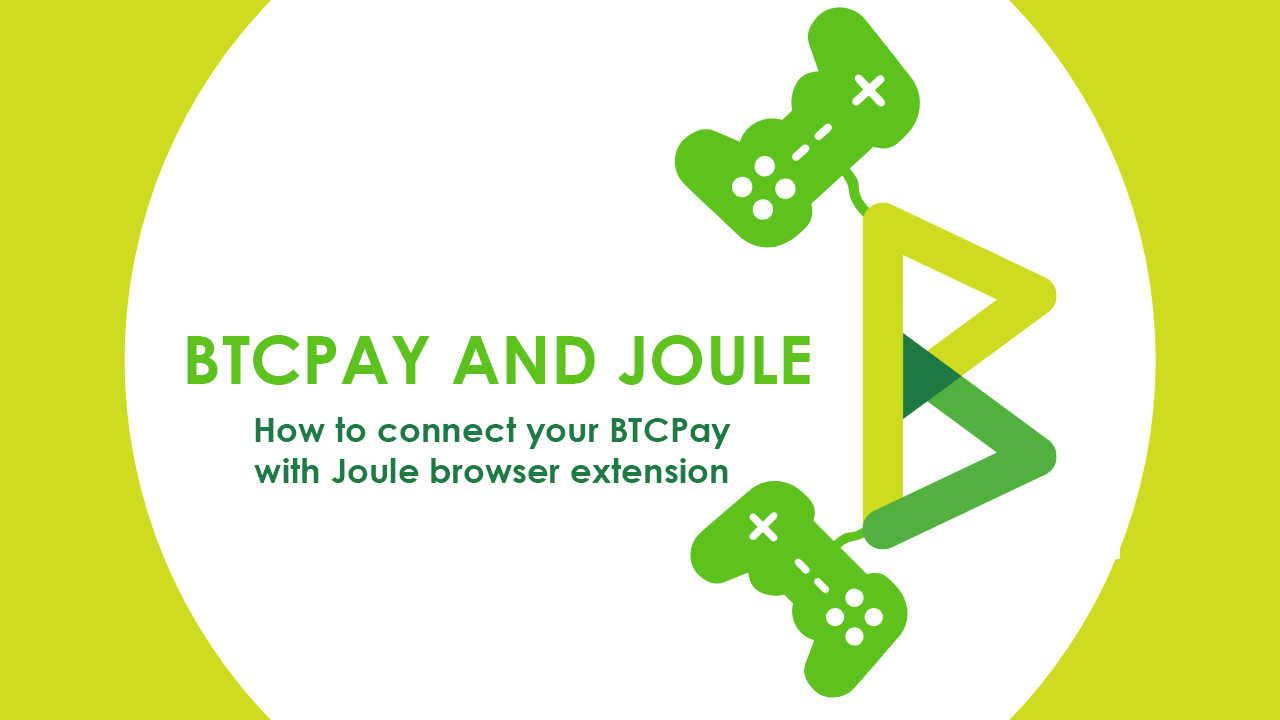
<style>
.page{position:relative;width:1280px;height:720px;background:#ffffff}
.page>*{position:absolute;margin:0}
.t1{font:67.4px "CenturyGothic-Bold";color:#5dc21e}
.t2{font:34.3px "CenturyGothic-Bold";color:#1e7a44}
</style>
<div class="page">
<p class="t1" style="left:187px;top:335px;width:623px;height:50px">BTCPAY AND JOULE</p>
<p class="t2" style="left:254px;top:417px;width:477px;height:66px;text-align:center">How to connect your BTCPay<br>with Joule browser extension</p>
</div>
